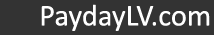
<style>
.page{position:relative;width:214px;height:35px;background:#333333}
.page>*{position:absolute;margin:0}
.t1{font:30.5px "Calibri";color:#ffffff}
</style>
<div class="page">
<p class="t1" style="left:41px;top:4px;width:169px;height:27px">PaydayLV.com</p>
</div>
